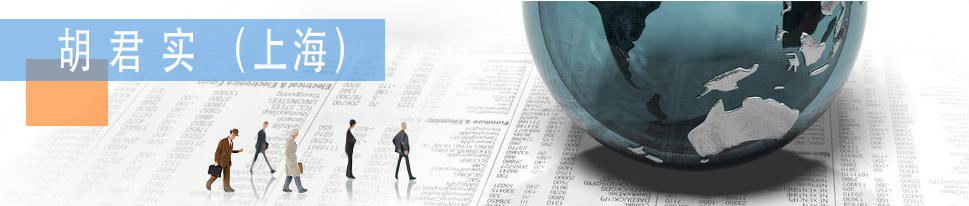
<style>
.page{position:relative;width:969px;height:206px}
.page>*{position:absolute;margin:0}
.t1{font:48.6px "STHeitiTC-Medium";letter-spacing:0.1em;color:#fcfafa;scale:0.74 1}
</style>
<div class="page">
<p class="t1" style="left:58px;top:27px;width:286px;height:46px">胡 君 实 （上海）</p>
</div>
